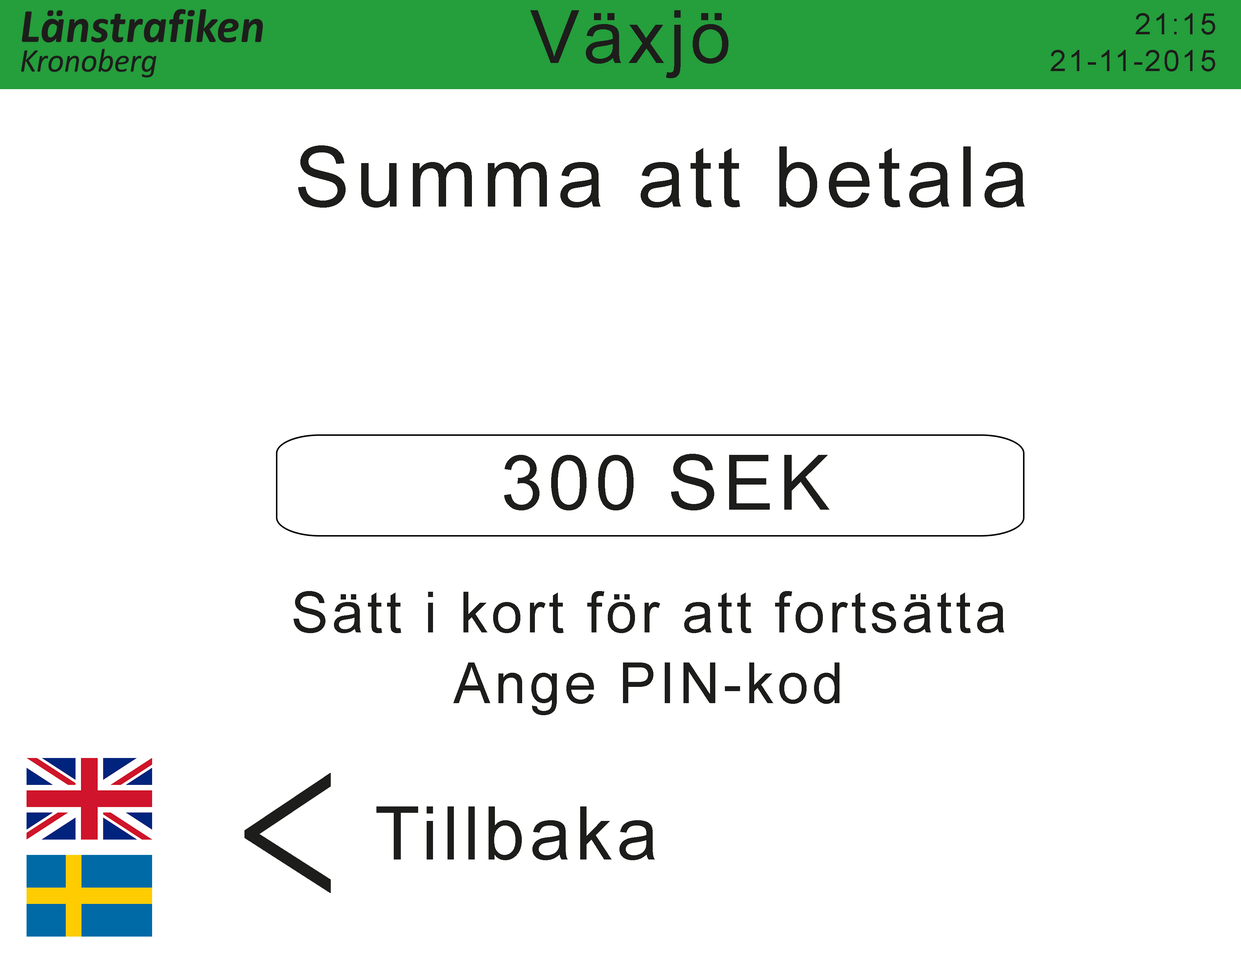
<style>
.page{position:relative;width:1241px;height:961px;background:#ffffff}
.page>*{position:absolute;margin:0}
.t1{font:73.4px "ArialMT";letter-spacing:0.06em;color:#1d1d1b}
.t2{font:29.8px "ArialMT";letter-spacing:0.06em;color:#1d1d1b}
.t3{font:84px "ArialMT";letter-spacing:0.06em;color:#1d1d1b}
.t4{font:76.4px "ArialMT";letter-spacing:0.06em;color:#1d1d1b}
.t5{font:56.7px "ArialMT";letter-spacing:0.06em;color:#1d1d1b}
.t6{font:226px "BanglaMN";letter-spacing:0.06em;color:#1d1d1b;scale:0.65 1}
.t7{font:73.8px "ArialMT";letter-spacing:0.06em;color:#1d1d1b}
</style>
<div class="page">
<p class="t1" style="left:530px;top:10px;width:198px;height:68px">Växjö</p>
<p class="t2" style="left:1135px;top:13px;width:80px;height:22px">21:15</p>
<p class="t2" style="left:1051px;top:50px;width:164px;height:21px">21-11-2015</p>
<p class="t3" style="left:298px;top:145px;width:727px;height:63px">Summa att betala</p>
<p class="t4" style="left:504px;top:454px;width:325px;height:56px">300 SEK</p>
<p class="t5" style="left:294px;top:591px;width:710px;height:42px">Sätt i kort för att fortsätta</p>
<p class="t5" style="left:453px;top:662px;width:386px;height:53px">Ange PIN-kod</p>
<p class="t6" style="left:244px;top:773px;width:87px;height:120px">&lt;</p>
<p class="t7" style="left:376px;top:806px;width:279px;height:54px">Tillbaka</p>
</div>
